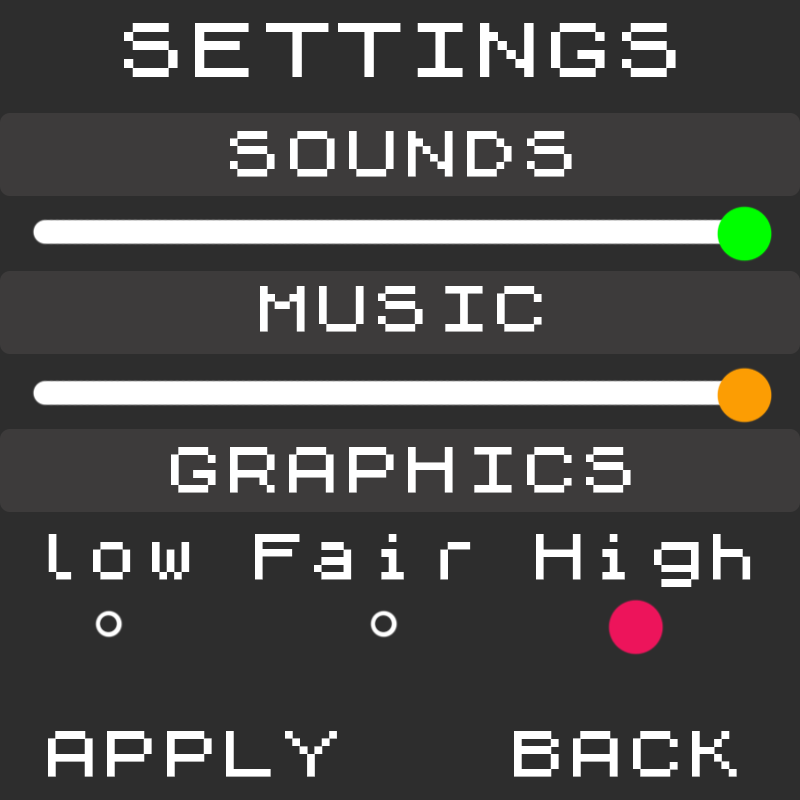
<style>
.page{position:relative;width:800px;height:800px;background:#2d2d2d}
.page>*{position:absolute;margin:0}
.t1{font:72px "ZXSpectrum";color:#ffffff}
.t2{font:60px "ZXSpectrum";color:#ffffff}
</style>
<div class="page">
<p class="t1" style="left:124px;top:23px;width:552px;height:54px">SETTINGS</p>
<p class="t2" style="left:230px;top:131px;width:342px;height:46px">SOUNDS</p>
<p class="t2" style="left:260px;top:286px;width:282px;height:46px">MUSIC</p>
<p class="t2" style="left:171px;top:447px;width:460px;height:46px">GRAPHICS</p>
<p class="t2" style="left:48px;top:731px;width:289px;height:46px">APPLY</p>
<p class="t2" style="left:514px;top:731px;width:223px;height:46px">BACK</p>
</div>
